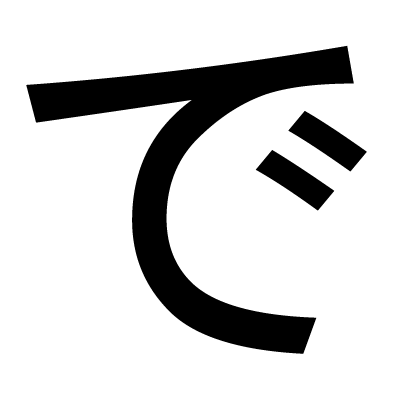
<style>
.page{position:relative;width:400px;height:400px;background:#ffffff}
.page>*{position:absolute;margin:0}
.t1{font:416.7px "MS-PGothic";color:#000000}
</style>
<div class="page">
<p class="t1" style="left:26px;top:45px;width:341px;height:309px">で</p>
</div>
